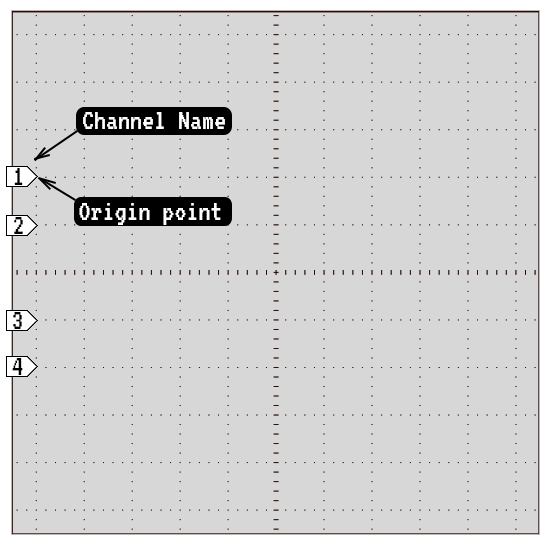
<style>
.page{position:relative;width:552px;height:548px;background:#d7d7d7}
.page>*{position:absolute;margin:0}
.t1{font:30px "VT323-Regular";color:#ffffff}
.t2{font:30px "VT323-Regular";color:#000000}
</style>
<div class="page">
<p class="t1" style="left:83px;top:112px;width:142px;height:17px">Channel Name</p>
<p class="t2" style="left:14px;top:168px;width:9px;height:17px">1</p>
<p class="t1" style="left:79px;top:203px;width:142px;height:22px">Origin point</p>
<p class="t2" style="left:14px;top:217px;width:9px;height:17px">2</p>
<p class="t2" style="left:13px;top:312px;width:9px;height:17px">3</p>
<p class="t2" style="left:12px;top:358px;width:11px;height:17px">4</p>
</div>
